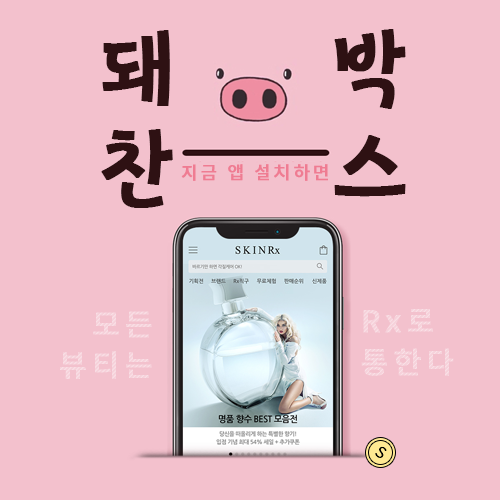
<style>
.page{position:relative;width:500px;height:500px;background:#f3c1cd}
.page>*{position:absolute;margin:0}
.t1{font:90px/100px "MapoBackpacking";letter-spacing:0.2em;color:#2e1113;font-weight:bold}
.t2{font:18px "NotoSansKR-Medium";letter-spacing:0.14em;color:#ef7c92;font-weight:bold}
.t3{font:30px/41px "NotoSansKR-Medium";letter-spacing:0.14em;color:#f6d1da;font-weight:bold}
.t4{font:20px "NotoSansKR-Thin";letter-spacing:0.14em;color:#000000;font-weight:bold}
</style>
<div class="page">
<p class="t1" style="left:101px;top:29px;width:305px;height:179px">돼   박<br>찬   스</p>
<p class="t2" style="left:181px;top:164px;width:147px;height:17px">지금 앱 설치하면</p>
<p class="t3" style="left:60px;top:311px;width:92px;height:68px;text-align:right">모든<br>뷰티는</p>
<p class="t3" style="left:361px;top:309px;width:93px;height:67px">Rx로<br>통한다</p>
<p class="t4" style="left:375px;top:446px;width:12px;height:12px;rotate:35deg">s</p>
</div>
